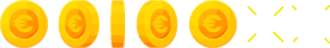
<style>
.page{position:relative;width:330px;height:48px;background:#ffffff}
.page>*{position:absolute;margin:0}
.t1{font:25px "Poppins-Bold";color:#fccd05}
.t2{font:25px "Poppins-Bold";color:#fccd05;scale:0.76 1}
</style>
<div class="page">
<p class="t1" style="left:14px;top:14px;width:19px;height:19px">€</p>
<p class="t2" style="left:153px;top:15px;width:15px;height:19px">€</p>
<p class="t1" style="left:203px;top:14px;width:19px;height:19px">€</p>
</div>
